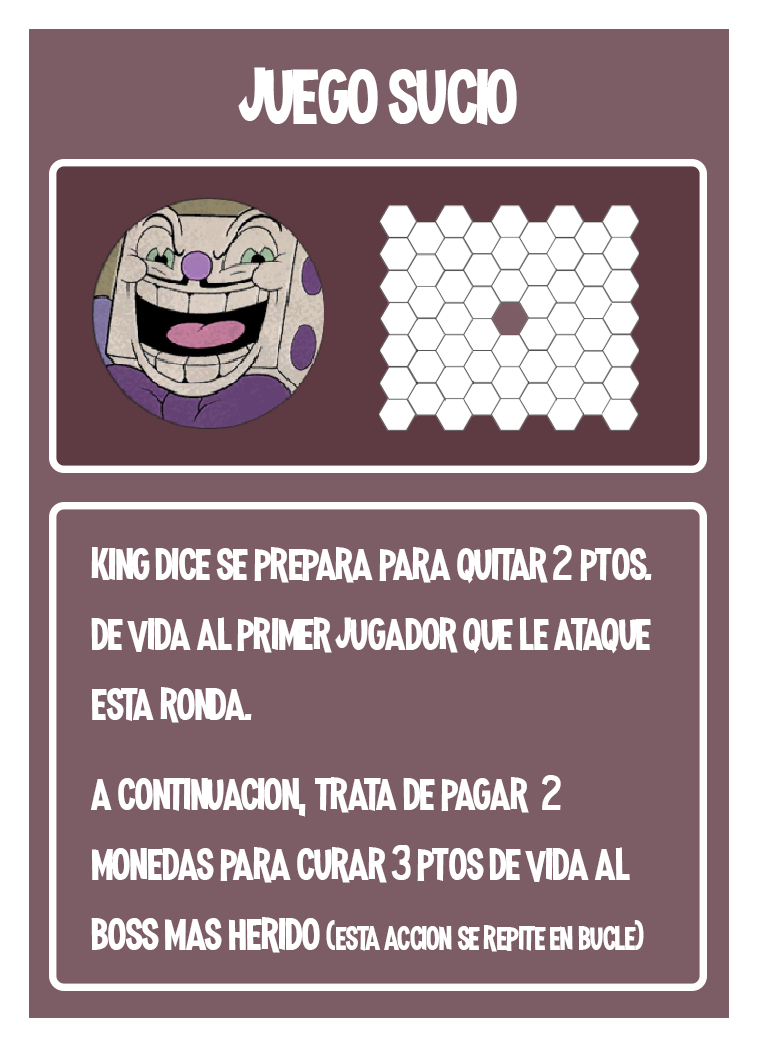
<style>
.page{position:relative;width:758px;height:1047px;background:#7d5d65}
.page>*{position:absolute;margin:0}
.t1{font:100px "MadnessHyperactive";color:#ffffff}
.t2{font:58.3px "MadnessHyperactive";color:#ffffff}
.t3{font:50px "MadnessHyperactive";color:#ffffff}
.t4{font:41.7px "MadnessHyperactive";color:#ffffff}
</style>
<div class="page">
<p class="t1" style="left:238px;top:67px;width:279px;height:58px">juego sucio</p>
<p class="t2" style="left:91px;top:545px;width:561px;height:178px">king dice se prepara para quitar <span class="t3">2</span> ptos. de vida al primer jugador que le ataque esta ronda.</p>
<p class="t4" style="left:90px;top:775px;width:554px;height:178px"><span class="t2">a continuacion, trata de pagar  </span><span class="t3">2</span><span class="t2"> monedas para curar </span><span class="t3">3</span><span class="t2"> ptos de vida al boss mas herido </span>(esta accion se repite en bucle)</p>
</div>
